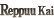
<style>
.page{position:relative;width:54px;height:18px;background:#ffffff}
.page>*{position:absolute;margin:0}
.t1{font:14px "RyuminPro-ExBold";letter-spacing:-0.095em;color:#4a3f32;font-weight:bold;scale:0.8 1}
.t2{font:12px "RyuminPro-ExBold";letter-spacing:-0.095em;color:#4a3f32;font-weight:bold;scale:0.8 1}
</style>
<div class="page">
<p class="t1" style="left:0px;top:4px;width:54px;height:14px">Reppuu <span class="t2">Kai</span></p>
</div>
